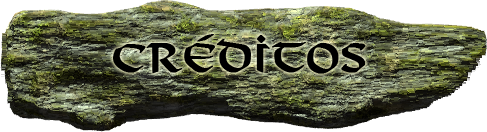
<style>
.page{position:relative;width:487px;height:132px;background:#ffffff}
.page>*{position:absolute;margin:0}
.t1{font:38px "Viking-Medium";color:#000000;font-weight:bold}
</style>
<div class="page">
<p class="t1" style="left:113px;top:34px;width:253px;height:40px">créditos</p>
</div>
